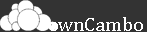
<style>
.page{position:relative;width:147px;height:32px;background:#333333}
.page>*{position:absolute;margin:0}
.t1{font:20px "Cambria";color:#ffffff}
</style>
<div class="page">
<p class="t1" style="left:49px;top:17px;width:94px;height:14px">ownCambo</p>
</div>
